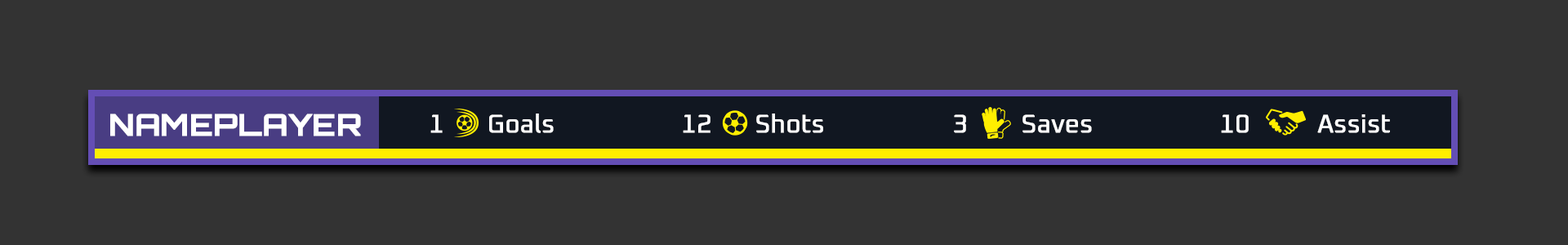
<style>
.page{position:relative;width:1568px;height:245px;background:#333333}
.page>*{position:absolute;margin:0}
.t1{font:30.1px "Orbitron-Bold";color:#ffffff;font-weight:bold}
.t2{font:25.4px "Oxanium-Regular";color:#ffffff;font-weight:bold}
</style>
<div class="page">
<p class="t1" style="left:110px;top:114px;width:251px;height:22px">NAMEPLAYER</p>
<p class="t2" style="left:489px;top:114px;width:65px;height:19px">Goals</p>
<p class="t2" style="left:756px;top:114px;width:67px;height:19px">Shots</p>
<p class="t2" style="left:430px;top:114px;width:13px;height:19px">1</p>
<p class="t2" style="left:683px;top:114px;width:27px;height:19px">12</p>
<p class="t2" style="left:954px;top:114px;width:12px;height:19px">3</p>
<p class="t2" style="left:1022px;top:114px;width:70px;height:19px">Saves</p>
<p class="t2" style="left:1221px;top:114px;width:28px;height:19px">10</p>
<p class="t2" style="left:1317px;top:114px;width:73px;height:19px">Assist</p>
</div>
